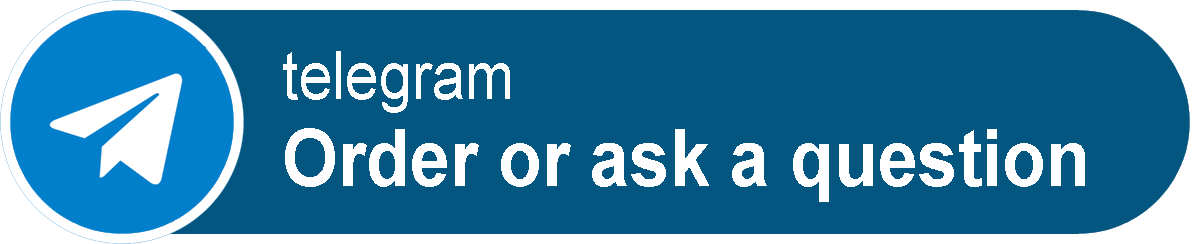
<style>
.page{position:relative;width:1200px;height:244px;background:#02567f}
.page>*{position:absolute;margin:0}
.t1{font:79.2px "Arial-BoldMT";color:#ffffff;scale:0.91 1}
.t2{font:66px "ArialMT";color:#ffffff;scale:0.91 1}
</style>
<div class="page">
<p class="t1" style="left:283px;top:51px;width:802px;height:151px"><span class="t2">telegram<br></span>Order or ask a question</p>
</div>
